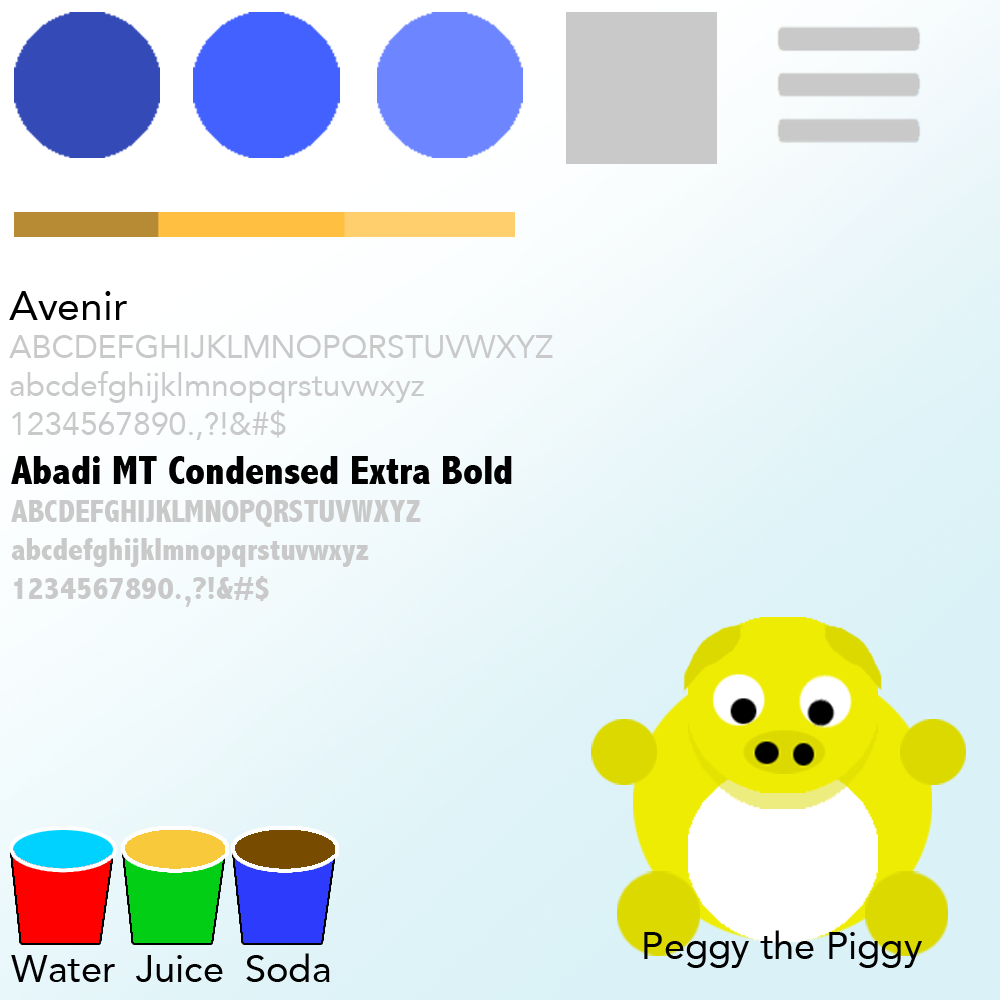
<style>
.page{position:relative;width:1000px;height:1000px}
.page>*{position:absolute;margin:0}
.t1{font:31.9px "Avenir-Roman";color:#c9c9c9}
.t2{font:40.9px "Avenir-Roman";color:#000000}
.t3{font:31.9px "AbadiMT-CondensedExtraBold";color:#c9c9c9}
.t4{font:40.9px "AbadiMT-CondensedExtraBold";color:#000000}
.t5{font:37.9px "Avenir-Roman";color:#000000}
</style>
<div class="page">
<p class="t1" style="left:9px;top:291px;width:544px;height:149px;text-align:justify"><span class="t2">Avenir<br></span>ABCDEFGHIJKLMNOPQRSTUVWXYZ<br>abcdefghijklmnopqrstuvwxyz<br>1234567890.,?!&amp;#$</p>
<p class="t3" style="left:11px;top:456px;width:501px;height:151px;text-align:justify"><span class="t4">Abadi MT Condensed Extra Bold<br></span>ABCDEFGHIJKLMNOPQRSTUVWXYZ<br>abcdefghijklmnopqrstuvwxyz<br>1234567890.,?!&amp;#$</p>
<p class="t5" style="left:644px;top:930px;width:278px;height:38px">Peggy the Piggy</p>
<p class="t5" style="left:11px;top:953px;width:319px;height:29px">Water  Juice  Soda</p>
</div>
